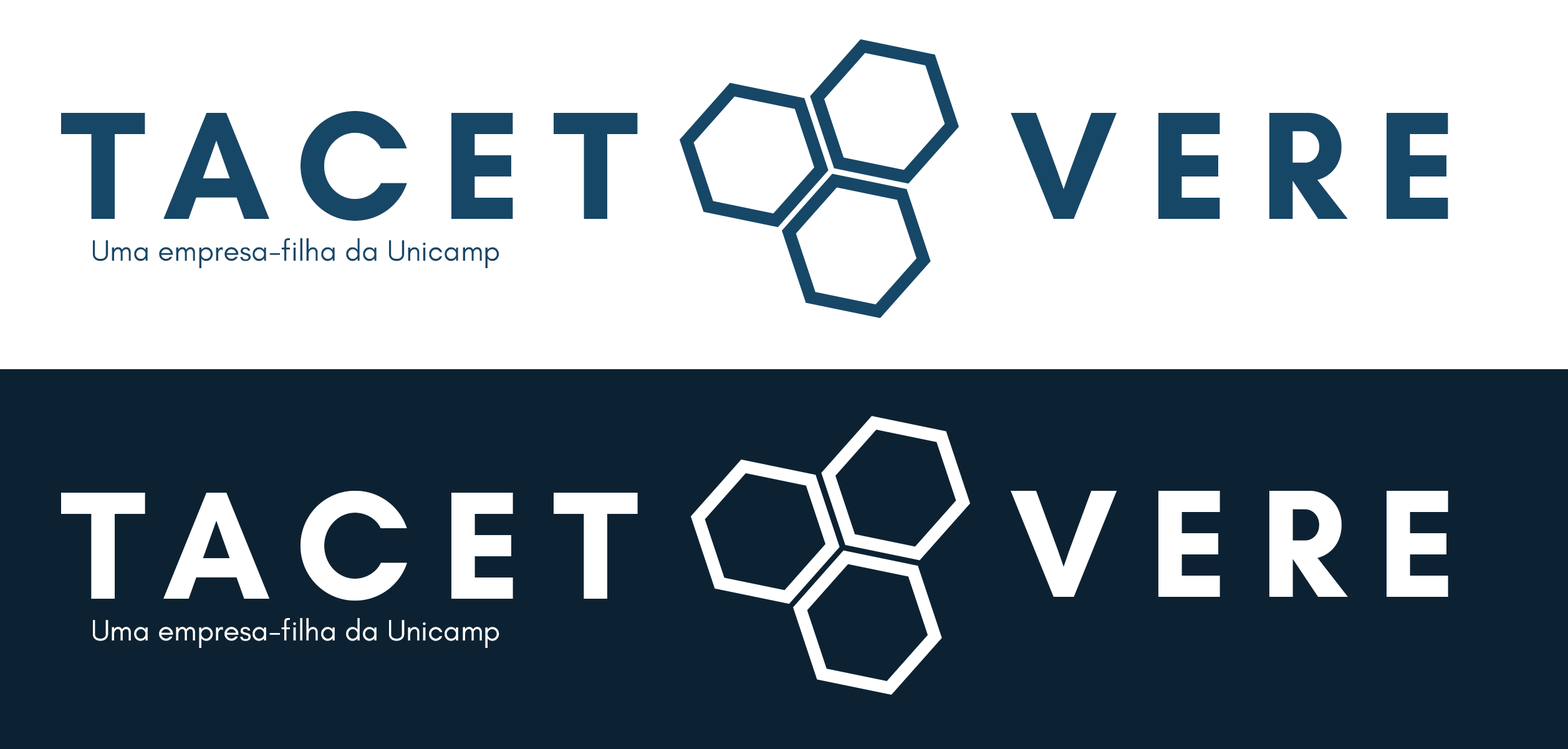
<style>
.page{position:relative;width:1568px;height:749px;background:#ffffff}
.page>*{position:absolute;margin:0}
.t1{font:155.9px "GlacialIndifference-Bold";letter-spacing:0.2em;color:#174767}
.t2{font:29.9px "GlacialIndifference-Regular";color:#174767}
.t3{font:155.9px "GlacialIndifference-Bold";letter-spacing:0.2em;color:#ffffff}
.t4{font:29.9px "GlacialIndifference-Regular";color:#ffffff}
</style>
<div class="page">
<p class="t1" style="left:61px;top:111px;width:577px;height:110px">TACET</p>
<p class="t1" style="left:1011px;top:113px;width:437px;height:106px">VERE</p>
<p class="t2" style="left:93px;top:238px;width:406px;height:30px">Uma empresa-filha da Unicamp</p>
<p class="t3" style="left:61px;top:491px;width:577px;height:109px">TACET</p>
<p class="t3" style="left:1011px;top:491px;width:437px;height:106px">VERE</p>
<p class="t4" style="left:93px;top:618px;width:406px;height:30px">Uma empresa-filha da Unicamp</p>
</div>
